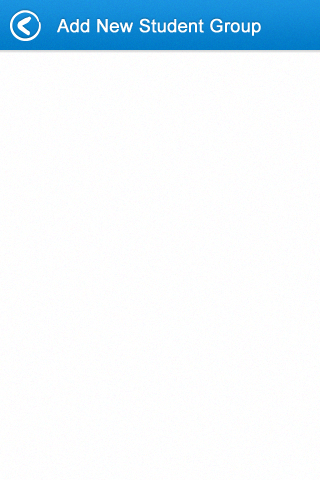
<style>
.page{position:relative;width:320px;height:480px}
.page>*{position:absolute;margin:0}
.t1{font:18px "ArialMT";letter-spacing:0.025em;color:#ffffff;font-weight:bold}
</style>
<div class="page">
<p class="t1" style="left:57px;top:18px;width:204px;height:18px">Add New Student Group</p>
</div>
